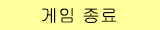
<style>
.page{position:relative;width:160px;height:30px;background:#ffff9c}
.page>*{position:absolute;margin:0}
.t1{font:18px "Gulim";color:#000000}
</style>
<div class="page">
<p class="t1" style="left:41px;top:8px;width:76px;height:15px">게임 종료</p>
</div>
